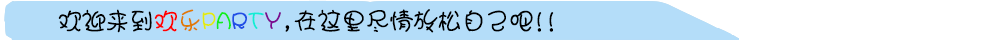
<style>
.page{position:relative;width:1000px;height:40px;background:#b4ddf9}
.page>*{position:absolute;margin:0}
.t1{font:24px "JWaWAZuan";color:#000000}
.t2{font:24px "JWaWAZuan";color:#ff0000}
.t3{font:24px "JWaWAZuan";color:#de7b07}
.t4{font:24px "JWaWAZuan";color:#e2ea10}
.t5{font:24px "JWaWAZuan";color:#14ed1f}
.t6{font:24px "JWaWAZuan";color:#204fe6}
.t7{font:24px "JWaWAZuan";color:#13ecd5}
.t8{font:24px "JWaWAZuan";color:#7c0b90}
</style>
<div class="page">
<p class="t1" style="left:58px;top:9px;width:496px;height:24px">欢迎来到<span class="t2">欢</span><span class="t3">乐</span><span class="t4">P</span><span class="t5">A</span><span class="t6">R</span><span class="t7">T</span><span class="t8">Y</span>,在这里尽情放松自己吧!!</p>
</div>
